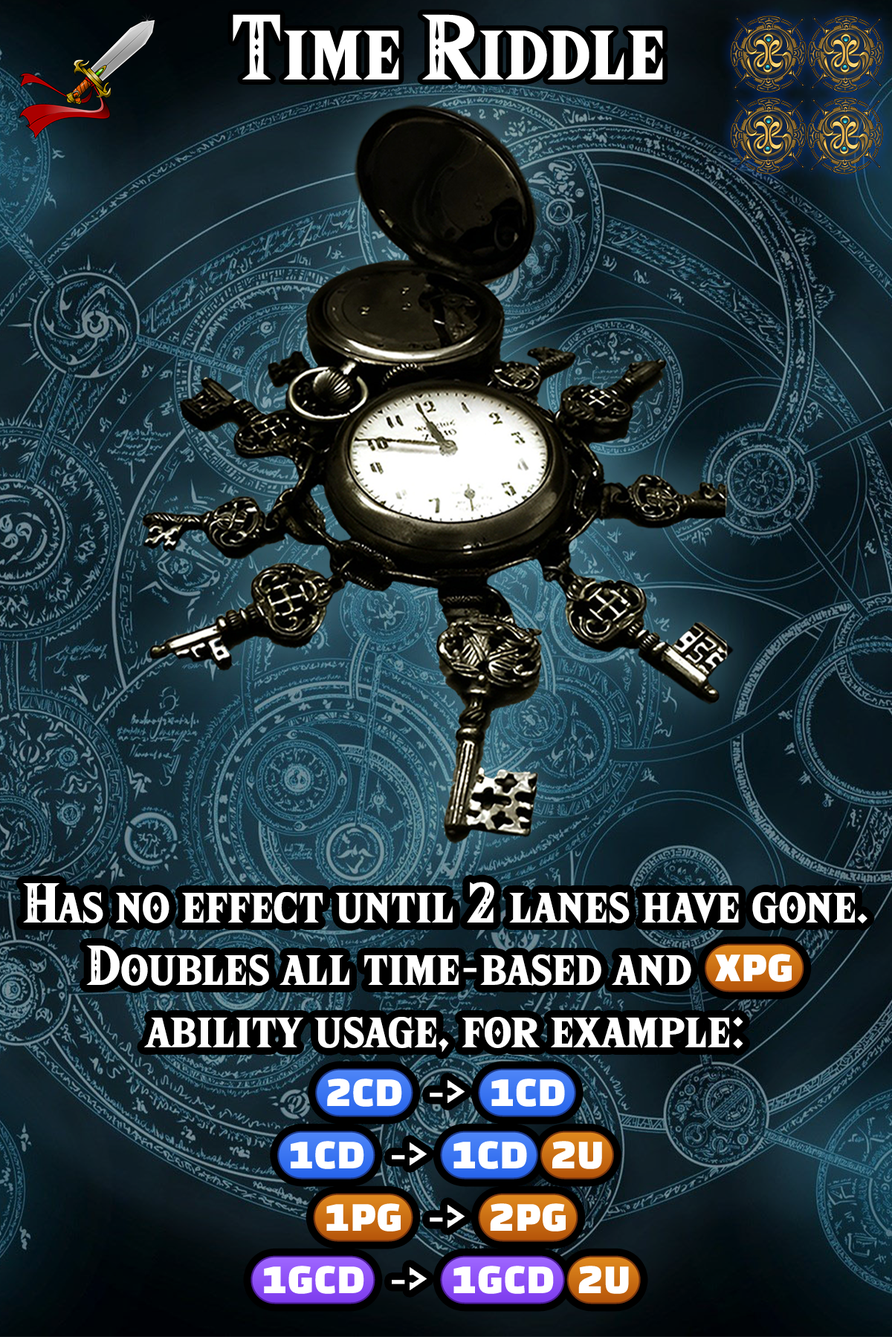
<style>
.page{position:relative;width:892px;height:1337px}
.page>*{position:absolute;margin:0}
.t1{font:138.2px "HyliaSerifBeta-Regular";color:#ffffff}
.t2{font:84px/62.4px "HyliaSerifBeta-Regular"}
.t3{font:84px/62.4px "stoogedings-Regular"}
</style>
<div class="page">
<p class="t1" style="left:233px;top:14px;width:430px;height:67px">Time Riddle</p>
<p class="t2" style="left:23px;top:882px;width:844px;height:423px;text-align:center">Has no effect until 2 lanes have gone.<br>Doubles all time-based and <span class="t3">(XPG)</span> ability usage, for example:<br><span class="t3">(2CD)</span> -&gt; <span class="t3">(1CD) <br>(1CD)</span> -&gt; <span class="t3">(1CD)(2U)<br>(1PG)</span> -&gt; <span class="t3">(2PG)<br>(1GCD)</span> -&gt; <span class="t3">(1GCD)(2U)</span></p>
</div>
